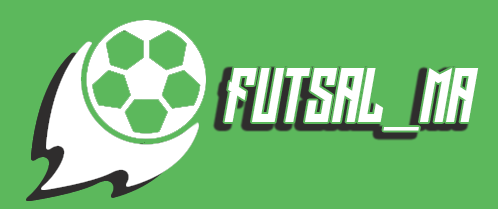
<style>
.page{position:relative;width:498px;height:209px;background:#5cb85c}
.page>*{position:absolute;margin:0}
.t1{font:69.6px "LongShot";color:#ffffff;font-style:italic}
.t2{font:69.6px "MyriadPro-Regular";color:#ffffff;font-style:italic}
</style>
<div class="page">
<p class="t1" style="left:224px;top:68px;width:255px;height:63px">FUTSAL<span class="t2">_</span>MA</p>
</div>
